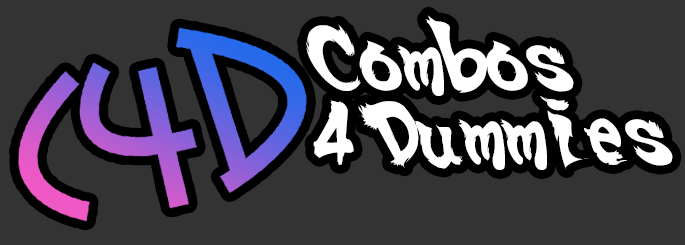
<style>
.page{position:relative;width:685px;height:245px;background:#333333}
.page>*{position:absolute;margin:0}
.t1{font:62px "SSF4-ABUKET-Regular";color:#ffffff}
</style>
<div class="page">
<p class="t1" style="left:305px;top:15px;width:368px;height:155px">Combos<br>4 Dummies</p>
</div>
